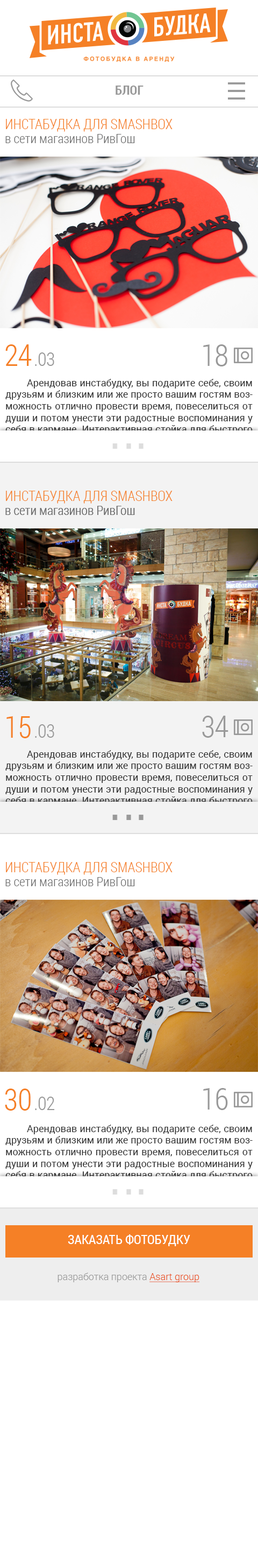
<style>
.page{position:relative;width:258px;height:1568px;background:#ffffff}
.page>*{position:absolute;margin:0}
.t1{font:12.9px "RobotoCondensed-Bold";color:#999999;text-transform:uppercase}
.t2{font:14px "RobotoCondensed-Light";color:#f58026;text-transform:uppercase}
.t3{font:12.9px "RobotoCondensed-Light";color:#6e6e6e}
.t4{font:30.2px "RobotoCondensed-Light";letter-spacing:-0.02em;color:#f58026;text-transform:uppercase}
.t5{font:18.8px "RobotoCondensed-Light";letter-spacing:-0.02em;color:#999999;text-transform:uppercase}
.t6{font:30.2px "RobotoCondensed-Light";letter-spacing:-0.02em;color:#999999;text-transform:uppercase}
.t7{font:9.7px "Roboto-Regular"}
.t8{font:9.7px "Roboto-Regular";color:#333333}
.t9{font:12.9px "RobotoCondensed-Regular";color:#ffffff;text-transform:uppercase}
.t10{font:9.7px "Roboto-Light";color:#999999}
.t11{font:9.7px "Roboto-Light";color:#e94e1b;text-decoration:underline}
</style>
<div class="page">
<p class="t1" style="left:116px;top:86px;width:28px;height:9px">блог</p>
<p class="t2" style="left:6px;top:119px;width:167px;height:13px">Инстабудка для smashbox</p>
<p class="t3" style="left:5px;top:134px;width:130px;height:9px">в сети магазинов РивГош</p>
<p class="t4" style="left:5px;top:344px;width:27px;height:22px">24</p>
<p class="t5" style="left:35px;top:352px;width:19px;height:14px">.03</p>
<p class="t6" style="left:203px;top:344px;width:25px;height:22px">18</p>
<p class="t7" style="left:5px;top:379px;width:248px;height:114px;text-align:justify">Арендовав инстабудку, вы подарите себе, своим друзьям и близким или же просто вашим гостям возможность отлично провести время, повеселиться от души и потом унести эти радостные воспоминания у себя в кармане. Интерактивная стойка для быстрого и удобного размещения фото в социальных сетях Facebook, Twitter, а также отправка на  e-mail и MMS. Это новшество позволит вам и вашим гостям делиться своими снимками из фотобудки с друзьями за считанные секунды.</p>
<p class="t2" style="left:6px;top:491px;width:167px;height:13px">Инстабудка для smashbox</p>
<p class="t3" style="left:5px;top:506px;width:130px;height:9px">в сети магазинов РивГош</p>
<p class="t3" style="left:5px;top:506px;width:130px;height:9px">в сети магазинов РивГош</p>
<p class="t4" style="left:6px;top:716px;width:25px;height:22px">15</p>
<p class="t5" style="left:35px;top:724px;width:19px;height:14px">.03</p>
<p class="t6" style="left:202px;top:716px;width:27px;height:22px">34</p>
<p class="t8" style="left:5px;top:750px;width:248px;height:68px;text-align:justify">Арендовав инстабудку, вы подарите себе, своим друзьям и близким или же просто вашим гостям возможность отлично провести время, повеселиться от души и потом унести эти радостные воспоминания у себя в кармане. Интерактивная стойка для быстрого и удобного разме</p>
<p class="t2" style="left:6px;top:862px;width:167px;height:13px">Инстабудка для smashbox</p>
<p class="t3" style="left:5px;top:877px;width:130px;height:9px">в сети магазинов РивГош</p>
<p class="t4" style="left:5px;top:1089px;width:26px;height:22px">30</p>
<p class="t5" style="left:35px;top:1097px;width:20px;height:13px">.02</p>
<p class="t6" style="left:203px;top:1088px;width:25px;height:22px">16</p>
<p class="t8" style="left:5px;top:1125px;width:248px;height:78px;text-align:justify">Арендовав инстабудку, вы подарите себе, своим друзьям и близким или же просто вашим гостям возможность отлично провести время, повеселиться от души и потом унести эти радостные воспоминания у себя в кармане. Интерактивная стойка для быстрого и удобного размещения фото в социальных сетях Facebook, Twitter, а такж</p>
<p class="t9" style="left:68px;top:1234px;width:122px;height:12px">заказать фотобудку</p>
<p class="t10" style="left:58px;top:1273px;width:142px;height:9px">разработка проекта <span class="t11">Asart group</span></p>
</div>
